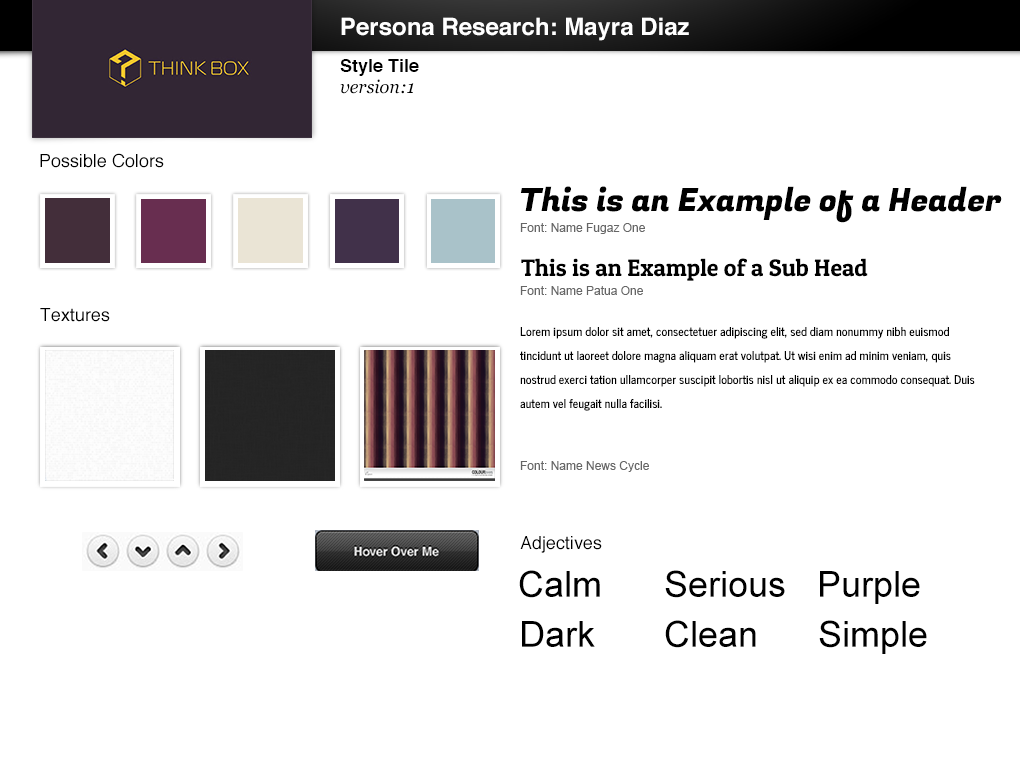
<style>
.page{position:relative;width:1020px;height:760px;background:#ffffff}
.page>*{position:absolute;margin:0}
.t1{font:24px "Helvetica-Bold";color:#ffffff}
.t2{font:18px "Helvetica-Bold";color:#000000}
.t3{font:18px "Georgia-Italic";color:#000000}
.t4{font:18px "Helvetica";color:#000000}
.t5{font:32px "FugazOne-Regular";color:#000000}
.t6{font:12px "ArialMT";color:#666666}
.t7{font:24px "PatuaOne-Regular";color:#000000}
.t8{font:12px/24px "NewsCycle";color:#000000}
.t9{font:36px "ArialMT";color:#000000}
</style>
<div class="page">
<p class="t1" style="left:341px;top:17px;width:348px;height:24px">Persona Research: Mayra Diaz</p>
<p class="t2" style="left:340px;top:59px;width:79px;height:17px">Style Tile</p>
<p class="t3" style="left:340px;top:79px;width:74px;height:15px">version:1</p>
<p class="t4" style="left:40px;top:153px;width:124px;height:15px">Possible Colors</p>
<p class="t5" style="left:520px;top:186px;width:482px;height:37px">This is an Example of a Header</p>
<p class="t6" style="left:520px;top:223px;width:125px;height:11px">Font: Name Fugaz One</p>
<p class="t7" style="left:521px;top:258px;width:347px;height:23px">This is an Example of a Sub Head</p>
<p class="t6" style="left:520px;top:286px;width:123px;height:9px">Font: Name Patua One</p>
<p class="t4" style="left:40px;top:308px;width:70px;height:14px">Textures</p>
<p class="t8" style="left:520px;top:327px;width:455px;height:84px">Lorem ipsum dolor sit amet, consectetuer adipiscing elit, sed diam nonummy nibh euismod tincidunt ut laoreet dolore magna aliquam erat volutpat. Ut wisi enim ad minim veniam, quis nostrud exerci tation ullamcorper suscipit lobortis nisl ut aliquip ex ea commodo consequat. Duis autem vel feugait nulla facilisi.</p>
<p class="t6" style="left:520px;top:461px;width:129px;height:11px">Font: Name News Cycle</p>
<p class="t4" style="left:520px;top:536px;width:82px;height:17px">Adjectives</p>
<p class="t9" style="left:519px;top:570px;width:81px;height:28px">Calm</p>
<p class="t9" style="left:665px;top:570px;width:120px;height:28px">Serious</p>
<p class="t9" style="left:820px;top:571px;width:100px;height:33px">Purple</p>
<p class="t9" style="left:522px;top:621px;width:73px;height:26px">Dark</p>
<p class="t9" style="left:665px;top:620px;width:91px;height:28px">Clean</p>
<p class="t9" style="left:819px;top:620px;width:108px;height:34px">Simple</p>
</div>
